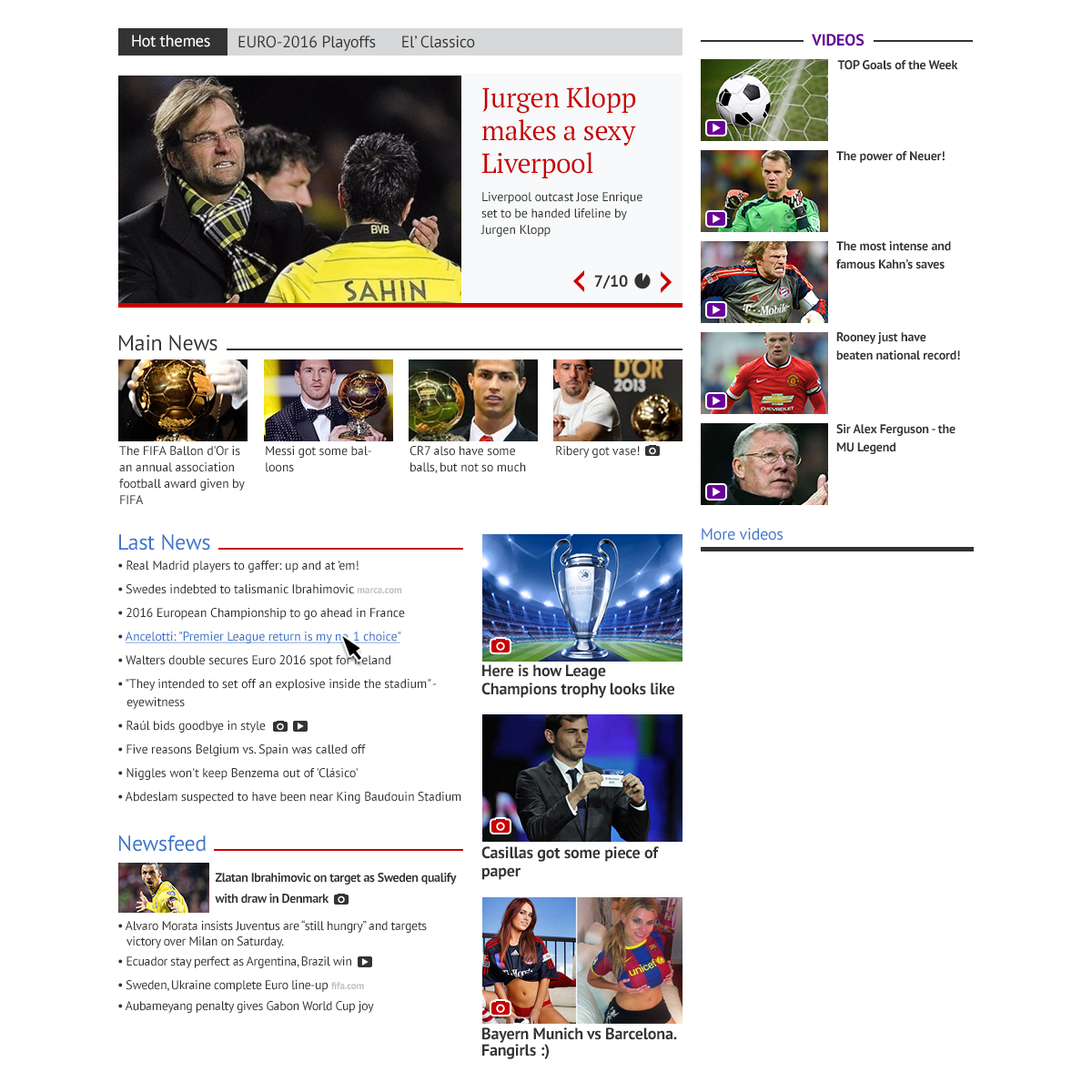
<style>
.page{position:relative;width:1092px;height:1092px;background:#ffffff}
.page>*{position:absolute;margin:0}
.t1{font:16.4px "PTSans-Regular";letter-spacing:-0.01em;color:#ffffff}
.t2{font:16.4px "PTSans-Regular";letter-spacing:-0.01em;color:#333333}
.t3{font:16.4px "PTSans-Bold";letter-spacing:-0.01em;color:#6a0099;text-transform:uppercase}
.t4{font:12.7px "PTSans-Bold";letter-spacing:-0.01em;color:#333333}
.t5{font:27.3px "PTSerif-Regular";letter-spacing:-0.01em;color:#c80000}
.t6{font:12.7px/16.4px "PTSans-Regular";letter-spacing:-0.01em;color:#333333}
.t7{font:12.7px/18.2px "PTSans-Bold";letter-spacing:-0.01em;color:#333333}
.t8{font:16.4px "PTSans-Bold";letter-spacing:-0.01em;color:#333333}
.t9{font:21.8px "PTSans-Regular";letter-spacing:-0.01em;color:#333333}
.t10{font:12.7px "PTSans-Regular";letter-spacing:-0.01em;color:#333333}
.t11{font:16.4px "PTSans-Regular";letter-spacing:-0.01em;color:#3d76cc}
.t12{font:21.8px "PTSans-Regular";letter-spacing:-0.01em;color:#3d76cc}
.t13{font:12.7px/18.2px "PTSans-Regular";letter-spacing:-0.01em;color:#333333}
.t14{font:12.7px "PTSans-Regular";letter-spacing:-0.025em;color:#333333}
.t15{font:10px/18.2px "PTSans-Bold";letter-spacing:-0.01em;color:#bfbfc0}
.t16{font:12.7px/18.2px "PTSans-Regular";letter-spacing:-0.01em;color:#3d76cc;text-decoration:underline}
.t17{font:16.4px/18.2px "PTSans-Bold";letter-spacing:-0.01em;color:#333333}
.t18{font:12.7px "PTSans-Bold";letter-spacing:-0.025em;color:#333333}
.t19{font:16.4px/16.4px "PTSans-Bold";letter-spacing:-0.01em;color:#333333}
</style>
<div class="page">
<p class="t1" style="left:132px;top:35px;width:78px;height:12px">Hot themes</p>
<p class="t2" style="left:238px;top:35px;width:237px;height:16px">EURO-2016 Playoffs      El’ Classico</p>
<p class="t3" style="left:811px;top:34px;width:53px;height:12px">VIDEOS</p>
<p class="t4" style="left:837px;top:60px;width:121px;height:10px">TOP Goals of the Week</p>
<p class="t5" style="left:481px;top:86px;width:155px;height:92px">Jurgen Klopp makes a sexy Liverpool</p>
<p class="t4" style="left:836px;top:151px;width:109px;height:12px">The power of Neuer!</p>
<p class="t6" style="left:480px;top:192px;width:162px;height:45px">Liverpool outcast Jose Enrique set to be handed lifeline by Jurgen Klopp</p>
<p class="t7" style="left:836px;top:241px;width:115px;height:28px">The most intense and famous Kahn’s saves</p>
<p class="t8" style="left:594px;top:275px;width:34px;height:14px">7/10</p>
<p class="t9" style="left:119px;top:335px;width:98px;height:16px">Main News</p>
<p class="t7" style="left:836px;top:332px;width:124px;height:28px">Rooney just have beaten national record!</p>
<p class="t7" style="left:836px;top:424px;width:119px;height:30px">Sir Alex Ferguson - the MU Legend</p>
<p class="t6" style="left:119px;top:446px;width:126px;height:58px">The FIFA Ballon d'Or is an annual association football award given by FIFA</p>
<p class="t6" style="left:266px;top:446px;width:105px;height:26px">Messi got some balloons</p>
<p class="t6" style="left:409px;top:446px;width:117px;height:28px">CR7 also have some balls, but not so much</p>
<p class="t10" style="left:556px;top:446px;width:84px;height:12px">Ribery got vase!</p>
<p class="t11" style="left:702px;top:528px;width:81px;height:13px">More videos</p>
<p class="t12" style="left:119px;top:534px;width:91px;height:17px">Last News</p>
<p class="t13" style="left:118px;top:561px;width:343px;height:243px"><span class="t14">• </span>Real Madrid players to gaffer: up and at 'em!<br><span class="t14">• </span>Swedes indebted to talismanic Ibrahimovic <span class="t15">marca.com<br></span><span class="t14">• </span>2016 European Championship to go ahead in France<br><span class="t14">• </span><span class="t16">Ancelotti: "Premier League return is my no. 1 choice"<br></span><span class="t14">• </span>Walters double secures Euro 2016 spot for Ireland<br><span class="t14">• </span>"They intended to set off an explosive inside the stadium" - eyewitness<br><span class="t14">• </span>Raúl bids goodbye in style<br><span class="t14">• </span>Five reasons Belgium vs. Spain was called off<br><span class="t14">• </span>Niggles won't keep Benzema out of 'Clásico'<br><span class="t14">• </span>Abdeslam suspected to have been near King Baudouin Stadium</p>
<p class="t17" style="left:481px;top:664px;width:193px;height:34px">Here is how Leage Champions trophy looks like</p>
<p class="t12" style="left:119px;top:835px;width:87px;height:17px">Newsfeed</p>
<p class="t17" style="left:481px;top:846px;width:178px;height:34px">Casillas got some piece of paper</p>
<p class="t18" style="left:215px;top:873px;width:242px;height:31px">Zlatan Ibrahimovic on target as Sweden qualify <br>with draw in Denmark</p>
<p class="t14" style="left:118px;top:920px;width:309px;height:93px">• Alvaro Morata insists Juventus are “still hungry” and targets victory over Milan on Saturday.<br>• Ecuador stay perfect as Argentina, Brazil win<br>• Sweden, Ukraine complete Euro line-up <span class="t15">fifa.com</span>  <br>• Aubameyang penalty gives Gabon World Cup joy</p>
<p class="t19" style="left:482px;top:1027px;width:195px;height:32px">Bayern Munich vs Barcelona. Fangirls :)</p>
</div>
